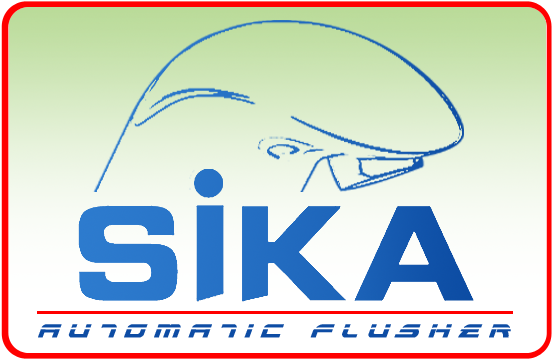
<style>
.page{position:relative;width:554px;height:360px}
.page>*{position:absolute;margin:0}
.t1{font:34.4px "AlexisLaserItalic";letter-spacing:0.3em;color:#0d4ca4;font-weight:bold;scale:0.91 1}
</style>
<div class="page">
<p class="t1" style="left:38px;top:324px;width:473px;height:14px">AUTOMATIC FLUSHER</p>
</div>
